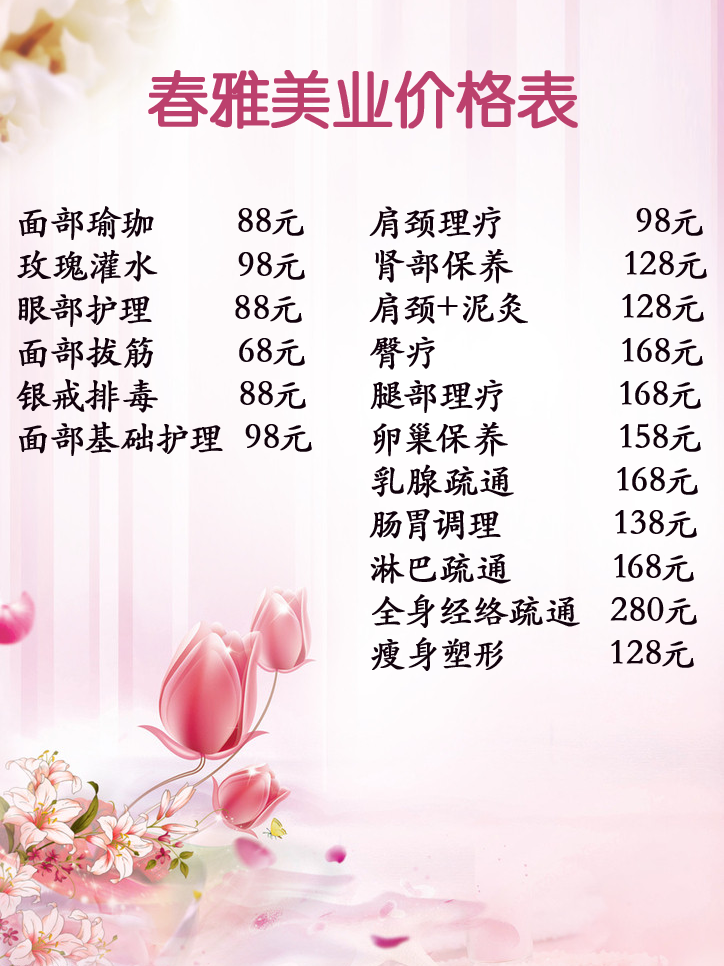
<style>
.page{position:relative;width:724px;height:966px}
.page>*{position:absolute;margin:0}
.t1{font:60px "STYuanti-TC-Regular";color:#bc406d;text-transform:uppercase;font-weight:bold}
.t2{font:36px "STKaitiSC-Regular";color:#11020c;text-transform:uppercase;font-weight:bold}
</style>
<div class="page">
<p class="t1" style="left:148px;top:70px;width:430px;height:59px">春雅美业价格表</p>
<p class="t2" style="left:16px;top:206px;width:296px;height:250px">面部瑜珈        88元<br>玫瑰灌水        98元<br>眼部护理        88元<br>面部拔筋        68元 <br>银戒排毒        88元 <br>面部基础护理  98元</p>
<p class="t2" style="left:369px;top:206px;width:338px;height:465px">肩颈理疗             98元     <br>肾部保养           128元<br>肩颈+泥灸         128元  <br>臀疗                  168元<br>腿部理疗           168元   <br>卵巢保养           158元                                 <br>乳腺疏通          168元    <br>肠胃调理           138元<br>淋巴疏通          168元<br>全身经络疏通   280元<br>瘦身塑形          128元</p>
</div>
